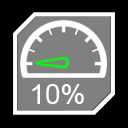
<style>
.page{position:relative;width:128px;height:128px;background:#000000}
.page>*{position:absolute;margin:0}
.t1{font:28px "ArialMT";color:#fefefe}
</style>
<div class="page">
<p class="t1" style="left:32px;top:84px;width:52px;height:20px">10%</p>
</div>
